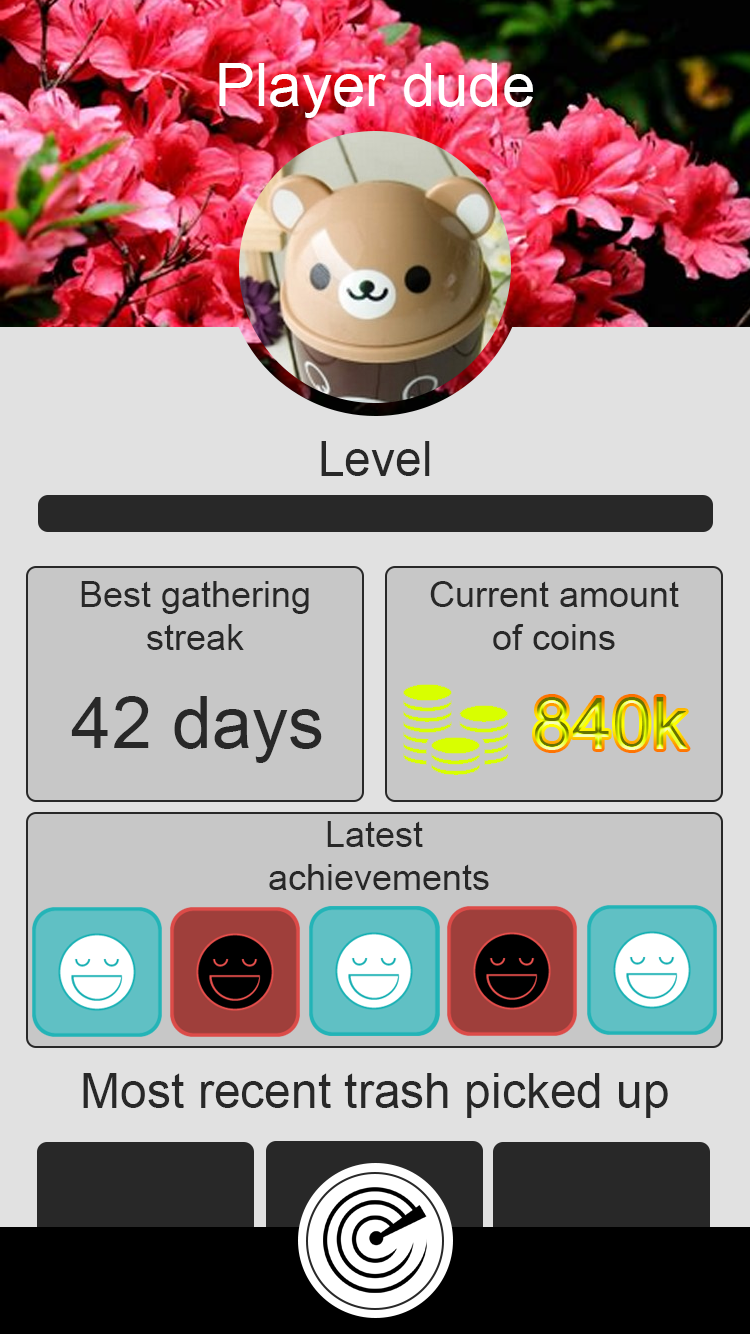
<style>
.page{position:relative;width:750px;height:1334px;background:#e1e1e1}
.page>*{position:absolute;margin:0}
.t1{font:60px "ArialMT";color:#ffffff}
.t2{font:48px "ArialMT";color:#282828}
.t3{font:36px "ArialMT";color:#282828}
.t4{font:72px "ArialMT";color:#282828}
.t5{font:72px "ArialMT"}
</style>
<div class="page">
<p class="t1" style="left:219px;top:63px;width:314px;height:55px">Player dude</p>
<p class="t2" style="left:321px;top:441px;width:109px;height:35px">Level</p>
<p class="t3" style="left:81px;top:581px;width:228px;height:69px;text-align:center">Best gathering<br>streak</p>
<p class="t3" style="left:430px;top:581px;width:249px;height:69px;text-align:center">Current amount<br>of coins</p>
<p class="t4" style="left:71px;top:696px;width:251px;height:67px">42 days</p>
<p class="t5" style="left:535px;top:697px;width:153px;height:53px">840k</p>
<p class="t3" style="left:269px;top:821px;width:220px;height:69px;text-align:center">Latest <br>achievements</p>
<p class="t2" style="left:83px;top:1073px;width:585px;height:45px">Most recent trash picked up</p>
</div>
